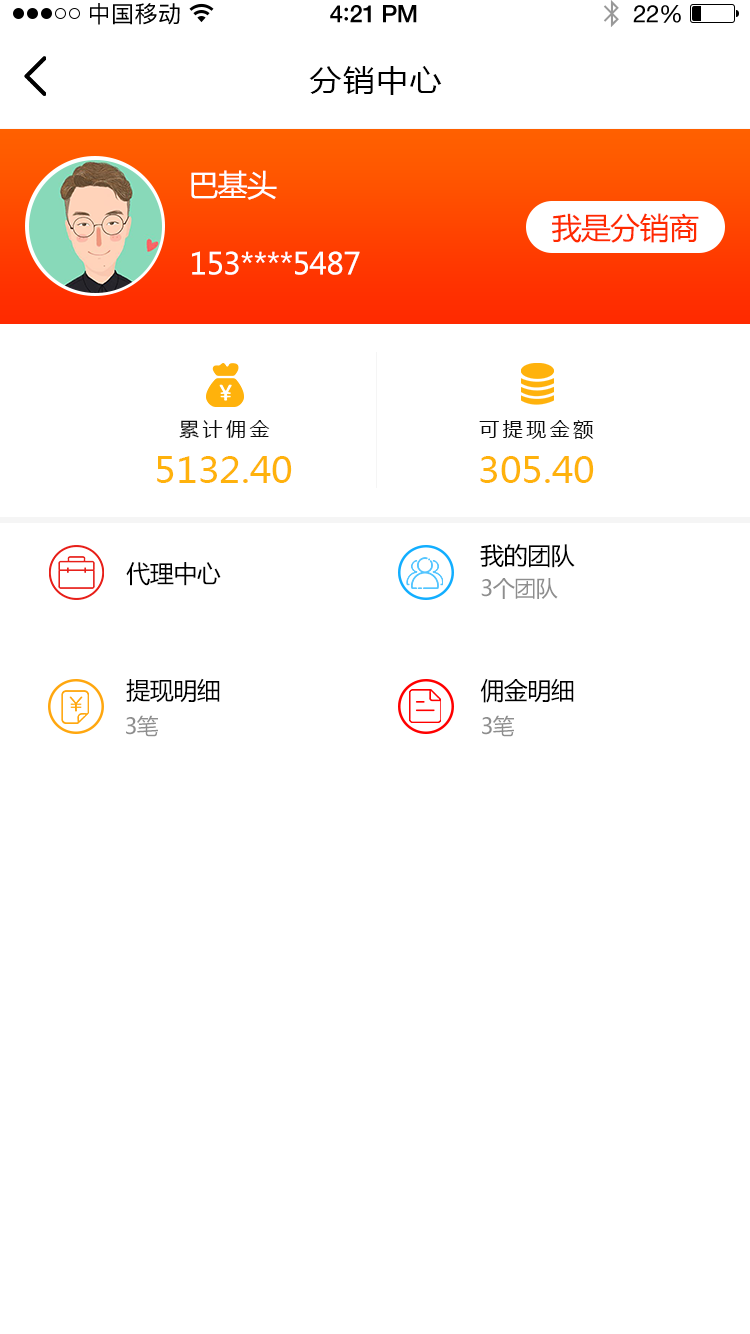
<style>
.page{position:relative;width:750px;height:1334px;background:#ffffff}
.page>*{position:absolute;margin:0}
.t1{font:23px "PingFangSC-Regular";letter-spacing:0.02em;color:#000000}
.t2{font:24px "HelveticaNeue-Medium";letter-spacing:-0.02em;color:#000000}
.t3{font:26px "Avenir-Medium";letter-spacing:-0.02em;color:#000000}
.t4{font:24px "HelveticaNeue";letter-spacing:-0.02em;color:#000000}
.t5{font:30px "MicrosoftYaHei";letter-spacing:0.05em;color:#000000;scale:1.06 1}
.t6{font:30px "MicrosoftYaHei";letter-spacing:-0.02em;color:#ffffff}
.t7{font:30px "MicrosoftYaHei";letter-spacing:-0.02em;color:#ff2a00}
.t8{font:19.1px "MicrosoftYaHei";letter-spacing:0.16em;color:#0d0d0d;scale:1.06 1}
.t9{font:35px "MicrosoftYaHei";color:#ffb20c;scale:1.05 1}
.t10{font:24px "MicrosoftYaHei";letter-spacing:-0.02em;color:#000000}
.t11{font:22px "MicrosoftYaHei";letter-spacing:-0.02em;color:#8e8e8e}
</style>
<div class="page">
<p class="t1" style="left:90px;top:3px;width:90px;height:22px">中国移动</p>
<p class="t2" style="left:330px;top:5px;width:87px;height:18px">4<span class="t3">:</span>21 PM</p>
<p class="t4" style="left:633px;top:5px;width:48px;height:18px">22%</p>
<p class="t5" style="left:309px;top:66px;width:133px;height:29px">分销中心</p>
<p class="t6" style="left:191px;top:170px;width:86px;height:30px">巴基头</p>
<p class="t7" style="left:552px;top:213px;width:147px;height:30px">我是分销商</p>
<p class="t6" style="left:192px;top:251px;width:168px;height:24px">153****5487</p>
<p class="t8" style="left:179px;top:420px;width:91px;height:19px">累计佣金</p>
<p class="t8" style="left:479px;top:420px;width:115px;height:19px">可提现金额</p>
<p class="t9" style="left:157px;top:456px;width:135px;height:27px">5132.40</p>
<p class="t9" style="left:480px;top:456px;width:114px;height:27px">305.40</p>
<p class="t10" style="left:480px;top:544px;width:95px;height:24px">我的团队</p>
<p class="t10" style="left:126px;top:562px;width:95px;height:24px">代理中心</p>
<p class="t11" style="left:481px;top:578px;width:77px;height:21px">3个团队</p>
<p class="t10" style="left:126px;top:678px;width:94px;height:25px">提现明细</p>
<p class="t10" style="left:480px;top:678px;width:94px;height:25px">佣金明细</p>
<p class="t11" style="left:126px;top:715px;width:32px;height:22px">3笔</p>
<p class="t11" style="left:482px;top:715px;width:32px;height:22px">3笔</p>
</div>
